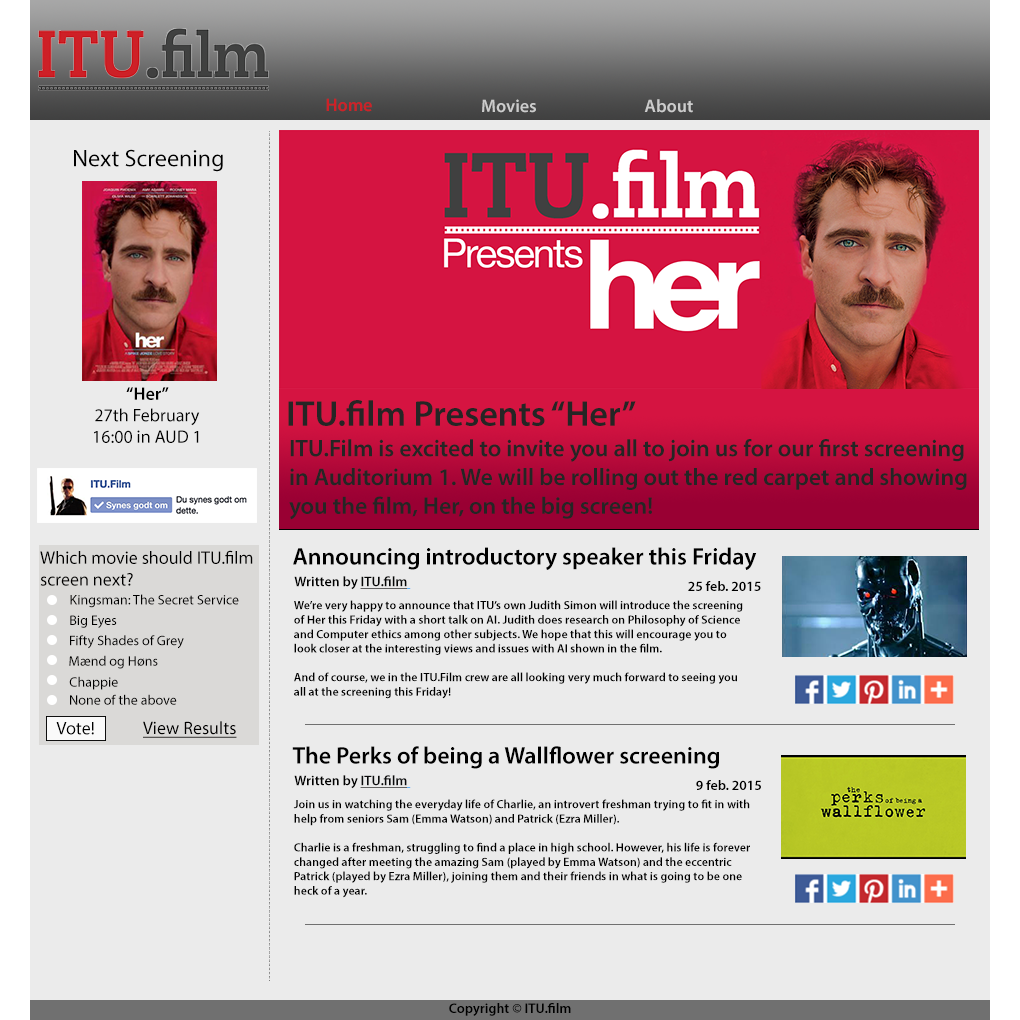
<style>
.page{position:relative;width:1020px;height:1020px;background:#ebebeb}
.page>*{position:absolute;margin:0}
.t1{font:18px "MyriadPro-Semibold";color:#ce2127}
.t2{font:18px "MyriadPro-Semibold";color:#cccccc}
.t3{font:24px "MyriadPro-Regular";color:#000000}
.t4{font:18px "MyriadPro-Regular";color:#000000}
.t5{font:18px "MyriadPro-Semibold";color:#000000}
.t6{font:36px "MyriadPro-Semibold";color:#252525}
.t7{font:24px "MyriadPro-Semibold";color:#252525}
.t8{font:24px "MyriadPro-Semibold";color:#000000}
.t9{font:14px "MyriadPro-Semibold";color:#000000}
.t10{font:14px "MyriadPro-Semibold";color:#050606;text-decoration:underline}
.t11{font:14px "MyriadPro-Regular";color:#000000}
.t12{font:12px "MyriadPro-Semibold";color:#000000}
.t13{font:18px "MyriadPro-Regular";color:#000000;text-decoration:underline}
.t14{font:14px "MyriadPro-Semibold";color:#090a0b;text-decoration:underline}
</style>
<div class="page">
<p class="t1" style="left:326px;top:98px;width:46px;height:14px">Home</p>
<p class="t2" style="left:482px;top:99px;width:54px;height:14px">Movies</p>
<p class="t2" style="left:644px;top:99px;width:49px;height:14px">About</p>
<p class="t3" style="left:74px;top:149px;width:149px;height:23px">Next Screening</p>
<p class="t4" style="left:94px;top:387px;width:106px;height:56px;text-align:center"><span class="t5">“Her”<br></span>27th February<br>16:00 in AUD 1</p>
<p class="t6" style="left:288px;top:400px;width:348px;height:26px">ITU.film Presents “Her”</p>
<p class="t7" style="left:289px;top:439px;width:678px;height:81px">ITU.Film is excited to invite you all to join us for our first screening<br>in Auditorium 1. We will be rolling out the red carpet and showing<br>you the film, Her, on the big screen!</p>
<p class="t7" style="left:289px;top:439px;width:678px;height:81px">ITU.Film is excited to invite you all to join us for our first screening<br>in Auditorium 1. We will be rolling out the red carpet and showing<br>you the film, Her, on the big screen!</p>
<p class="t4" style="left:40px;top:550px;width:213px;height:36px">Which movie should ITU.film screen next?</p>
<p class="t8" style="left:293px;top:547px;width:464px;height:23px">Announcing introductory speaker this Friday</p>
<p class="t9" style="left:294px;top:576px;width:117px;height:14px">Written by <span class="t10">ITU.film</span></p>
<p class="t9" style="left:688px;top:581px;width:73px;height:10px">25 feb. 2015</p>
<p class="t11" style="left:70px;top:594px;width:169px;height:14px">Kingsman: The Secret Service</p>
<p class="t12" style="left:294px;top:600px;width:449px;height:99px">We’re very happy to announce that ITU’s own Judith Simon will introduce the screening of Her this Friday with a short talk on AI. Judith does research on Philosophy of Science and Computer ethics among other subjects. We hope that this will encourage you to look closer at the interesting views and issues with AI shown in the film.<br><br>And of course, we in the ITU.Film crew are all looking very much forward to seeing you all at the screening this Friday!</p>
<p class="t11" style="left:70px;top:615px;width:47px;height:13px">Big Eyes</p>
<p class="t11" style="left:70px;top:635px;width:114px;height:14px">Fifty Shades of Grey</p>
<p class="t11" style="left:69px;top:655px;width:89px;height:14px">Mænd og Høns</p>
<p class="t11" style="left:69px;top:676px;width:49px;height:14px">Chappie</p>
<p class="t11" style="left:70px;top:694px;width:107px;height:11px">None of the above</p>
<p class="t4" style="left:56px;top:722px;width:38px;height:13px">Vote!</p>
<p class="t13" style="left:143px;top:721px;width:94px;height:17px">View Results</p>
<p class="t8" style="left:292px;top:746px;width:427px;height:23px">The Perks of being a Wallflower screening</p>
<p class="t9" style="left:294px;top:775px;width:117px;height:14px">Written by <span class="t14">ITU.film</span></p>
<p class="t9" style="left:696px;top:780px;width:65px;height:10px">9 feb. 2015</p>
<p class="t12" style="left:293px;top:799px;width:457px;height:99px">Join us in watching the everyday life of Charlie, an introvert freshman trying to fit in with help from seniors Sam (Emma Watson) and Patrick (Ezra Miller).<br><br>Charlie is a freshman, struggling to find a place in high school. However, his life is forever changed after meeting the amazing Sam (played by Emma Watson) and the eccentric Patrick (played by Ezra Miller), joining them and their friends in what is going to be one heck of a year.</p>
<p class="t9" style="left:449px;top:1003px;width:122px;height:13px">Copyright © ITU.film</p>
</div>
